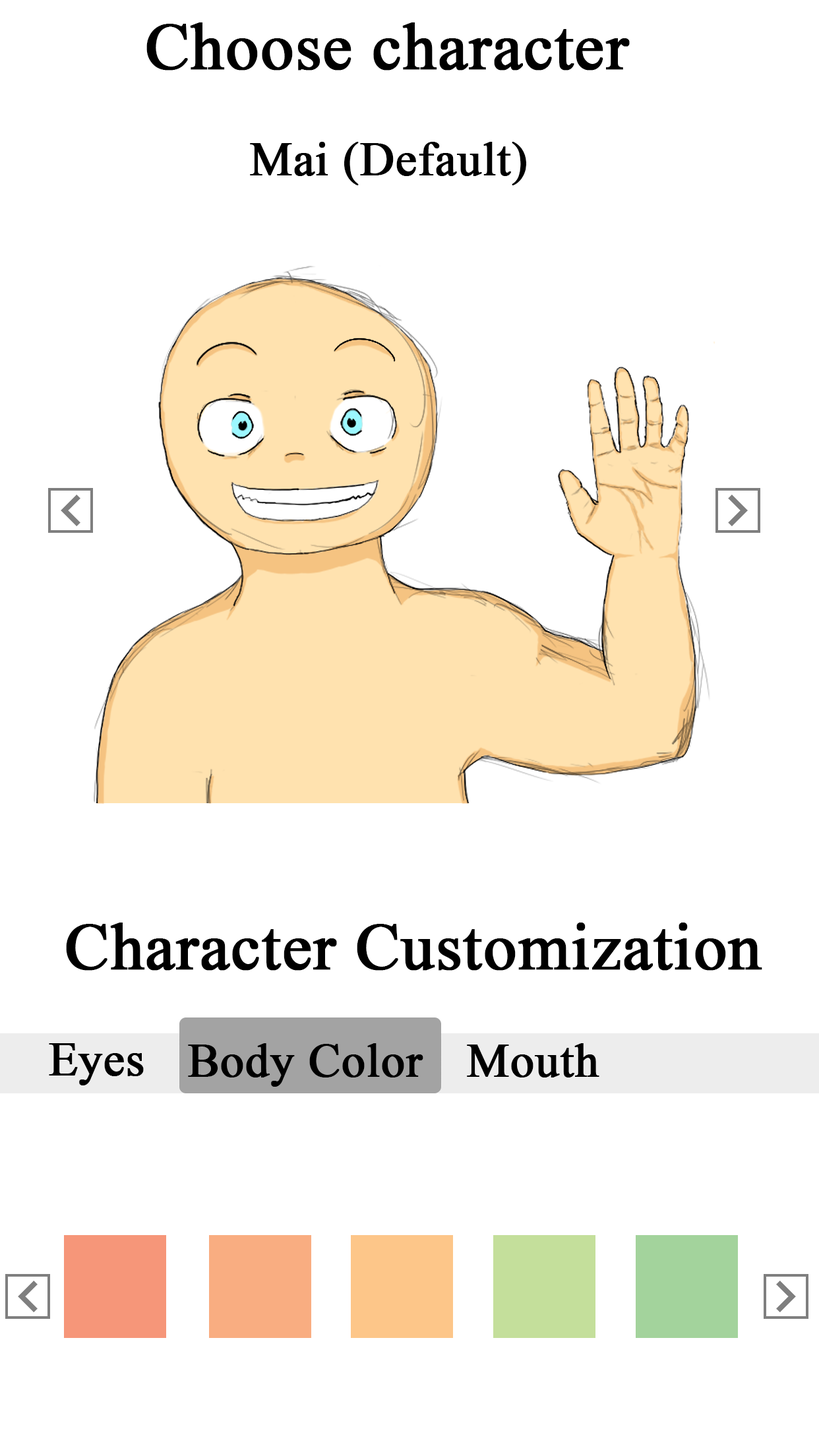
<style>
.page{position:relative;width:819px;height:1456px;background:#ffffff}
.page>*{position:absolute;margin:0}
.t1{font:65.9px "TimesNewRomanPSMT";color:#000000;font-weight:bold}
.t2{font:47.5px "TimesNewRomanPSMT";color:#000000;font-weight:bold}
</style>
<div class="page">
<p class="t1" style="left:146px;top:22px;width:484px;height:49px">Choose character</p>
<p class="t2" style="left:250px;top:142px;width:276px;height:43px">Mai (Default)</p>
<p class="t1" style="left:66px;top:923px;width:696px;height:48px">Character Customization</p>
<p class="t2" style="left:49px;top:1043px;width:95px;height:42px">Eyes</p>
<p class="t2" style="left:188px;top:1043px;width:235px;height:44px">Body Color</p>
<p class="t2" style="left:467px;top:1043px;width:132px;height:34px">Mouth</p>
</div>
